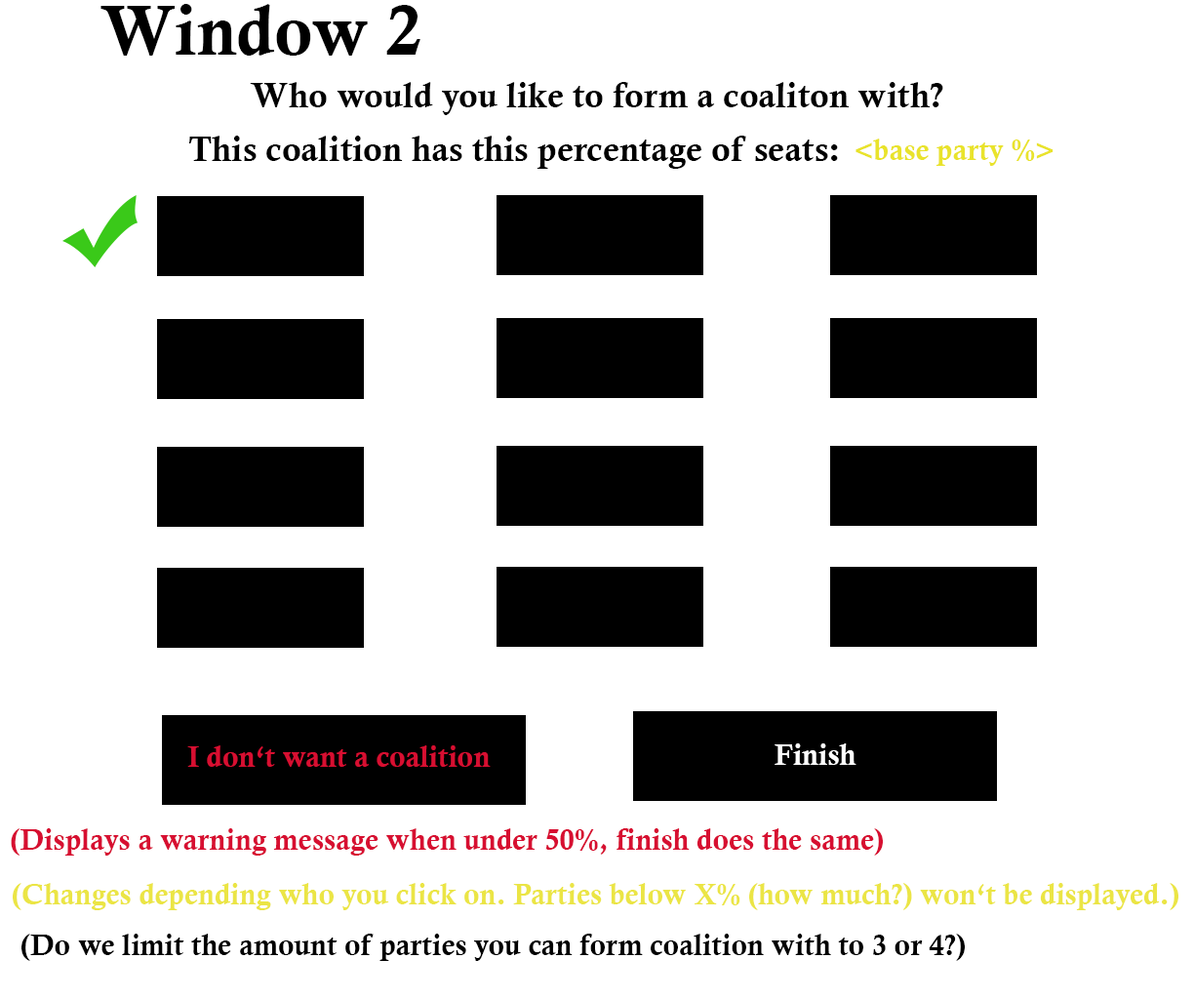
<style>
.page{position:relative;width:1194px;height:999px;background:#ffffff}
.page>*{position:absolute;margin:0}
.t1{font:70.2px "CalisMTBol";color:#000000}
.t2{font:35.1px "CalisMTBol";color:#000000}
.t3{font:29.3px "CalisMTBol";color:#e9e32b}
.t4{font:29.3px "CalisMTBol";color:#d70f31}
.t5{font:29.3px "CalisMTBol";color:#ffffff}
.t6{font:29.3px "CalisMTBol";color:#ebe545}
.t7{font:29.3px "CalisMTBol";color:#000000}
</style>
<div class="page">
<p class="t1" style="left:100px;top:4px;width:320px;height:52px">Window 2</p>
<p class="t2" style="left:250px;top:82px;width:693px;height:33px">Who would you like to form a coaliton with?</p>
<p class="t2" style="left:188px;top:136px;width:650px;height:33px">This coalition has this percentage of seats:</p>
<p class="t3" style="left:855px;top:139px;width:198px;height:27px">&lt;base party %&gt;</p>
<p class="t4" style="left:187px;top:745px;width:304px;height:22px">I don‘t want a coalition</p>
<p class="t5" style="left:774px;top:743px;width:82px;height:22px">Finish</p>
<p class="t4" style="left:11px;top:828px;width:872px;height:27px">(Displays a warning message when under 50%, finish does the same)</p>
<p class="t6" style="left:13px;top:883px;width:1165px;height:27px">(Changes depending who you click on. Parties below X% (how much?) won‘t be displayed.)</p>
<p class="t7" style="left:21px;top:933px;width:944px;height:28px">(Do we limit the amount of parties you can form coalition with to 3 or 4?)</p>
</div>
